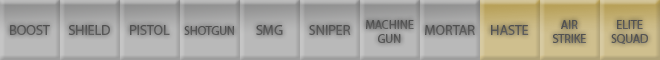
<style>
.page{position:relative;width:660px;height:60px}
.page>*{position:absolute;margin:0}
.t1{font:14px "MyriadPro-Regular";color:#575757}
.t2{font:14px "MyriadPro-Regular";color:#595959}
.t3{font:12px "MyriadPro-Regular";color:#585858}
.t4{font:14px "MyriadPro-Regular";color:#5a5a5a}
.t5{font:12px "MyriadPro-Regular";color:#575757}
.t6{font:12px "MyriadPro-Regular";color:#565656}
</style>
<div class="page">
<p class="t1" style="left:10px;top:25px;width:40px;height:10px">BOOST</p>
<p class="t2" style="left:68px;top:25px;width:42px;height:10px">SHIELD</p>
<p class="t1" style="left:130px;top:25px;width:40px;height:10px">PISTOL</p>
<p class="t3" style="left:184px;top:26px;width:50px;height:9px">SHOTGUN</p>
<p class="t2" style="left:256px;top:25px;width:27px;height:10px">SMG</p>
<p class="t4" style="left:309px;top:25px;width:42px;height:10px">SNIPER</p>
<p class="t5" style="left:366px;top:20px;width:48px;height:23px;text-align:center">MACHINE<br>GUN</p>
<p class="t2" style="left:425px;top:25px;width:50px;height:10px">MORTAR</p>
<p class="t1" style="left:491px;top:25px;width:38px;height:10px">HASTE</p>
<p class="t3" style="left:552px;top:20px;width:34px;height:23px;text-align:center">AIR<br>STRIKE</p>
<p class="t6" style="left:611px;top:20px;width:37px;height:24px;text-align:center">ELITE<br>SQUAD</p>
</div>
